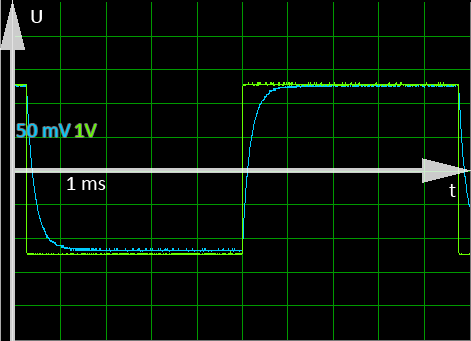
<style>
.page{position:relative;width:471px;height:341px;background:#000000}
.page>*{position:absolute;margin:0}
.t1{font:36px "Calibri";color:#ffffff}
.t2{font:36px "Calibri";color:#00ccff}
.t3{font:36px "Calibri";color:#66ff00}
</style>
<div class="page">
<p class="t1" style="left:31px;top:10px;width:11px;height:13px">U</p>
<p class="t2" style="left:17px;top:124px;width:54px;height:13px">50 mV</p>
<p class="t3" style="left:75px;top:124px;width:22px;height:13px">1V</p>
<p class="t1" style="left:67px;top:177px;width:39px;height:13px">1 ms</p>
<p class="t1" style="left:449px;top:184px;width:7px;height:13px">t</p>
</div>
